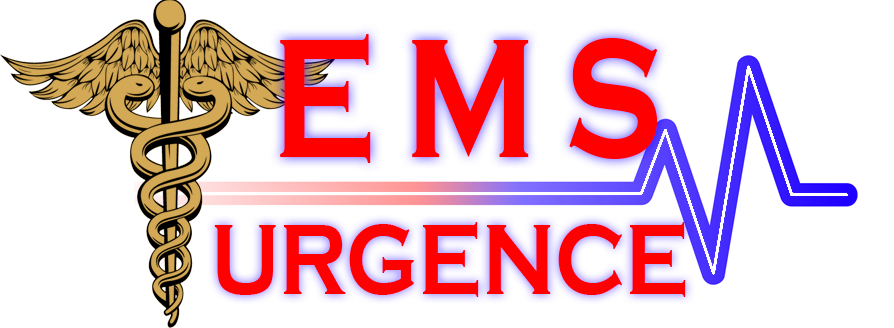
<style>
.page{position:relative;width:894px;height:328px;background:#ffffff}
.page>*{position:absolute;margin:0}
.t1{font:175.9px "CopperplateGothic-Bold";letter-spacing:0.2em;color:#ff0000;scale:0.78 1}
.t2{font:102.6px "CopperplateGothic-Bold";color:#ff0000;scale:0.82 1}
</style>
<div class="page">
<p class="t1" style="left:280px;top:34px;width:378px;height:129px">EMS</p>
<p class="t2" style="left:214px;top:222px;width:472px;height:75px">URGENCE</p>
</div>
